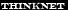
<style>
.page{position:relative;width:68px;height:10px;background:#000000}
.page>*{position:absolute;margin:0}
.t1{font:9px "EngraversMT";color:#ffffff}
</style>
<div class="page">
<p class="t1" style="left:1px;top:2px;width:64px;height:8px">Thinknet</p>
</div>
